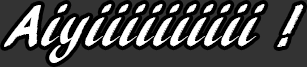
<style>
.page{position:relative;width:307px;height:67px;background:#333333}
.page>*{position:absolute;margin:0}
.t1{font:60px "ARBLANCA";color:#ffffff}
</style>
<div class="page">
<p class="t1" style="left:4px;top:4px;width:300px;height:59px">Aiyiiiiiiiiii !</p>
</div>
